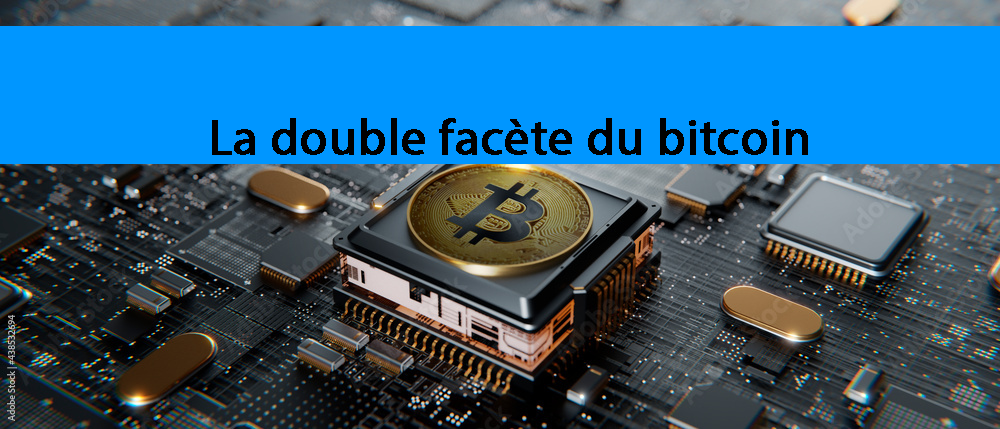
<style>
.page{position:relative;width:1000px;height:429px;background:#0096ff}
.page>*{position:absolute;margin:0}
.t1{font:50px "MyriadPro-Regular";color:#000000;font-weight:bold}
</style>
<div class="page">
<p class="t1" style="left:212px;top:118px;width:596px;height:37px">La double facète du bitcoin</p>
</div>
